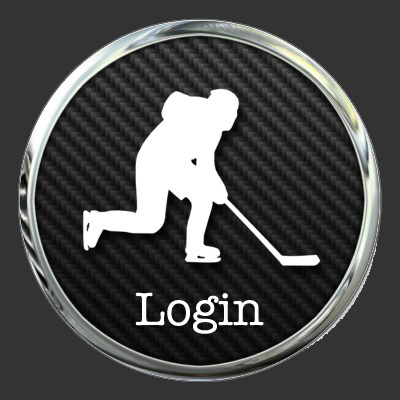
<style>
.page{position:relative;width:400px;height:400px;background:#333333}
.page>*{position:absolute;margin:0}
.t1{font:48px "AmericanTypewriter";color:#ffffff}
</style>
<div class="page">
<p class="t1" style="left:135px;top:292px;width:129px;height:42px">Login</p>
</div>
